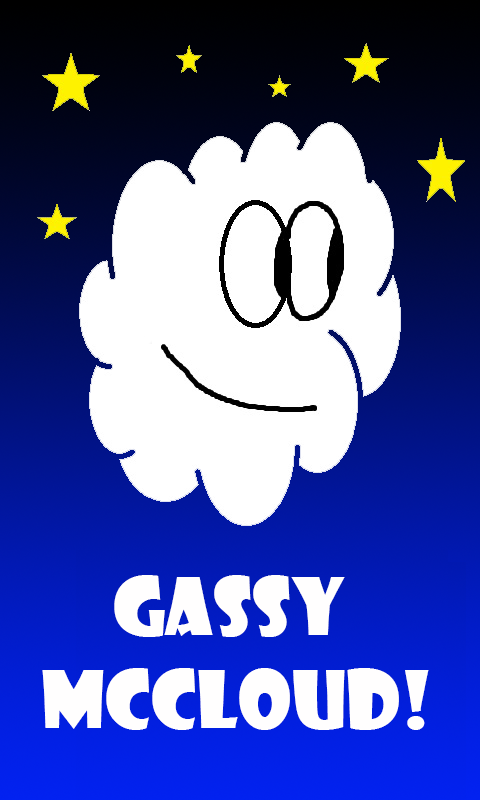
<style>
.page{position:relative;width:480px;height:800px;background:#ffffff}
.page>*{position:absolute;margin:0}
.t1{font:77.3px "ShowcardGothic-Reg";color:#fffefe}
.t2{font:96px "MyriadPro-Regular";color:#fffefe}
</style>
<div class="page">
<p class="t1" style="left:42px;top:575px;width:387px;height:155px"><span class="t2">  </span>GASSY McClOUD!</p>
</div>
